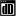
<style>
.page{position:relative;width:16px;height:16px;background:#010000}
.page>*{position:absolute;margin:0}
.t1{font:13.1px "Impact";color:#010000;scale:0.83 1}
</style>
<div class="page">
<p class="t1" style="left:2px;top:4px;width:12px;height:10px">dD</p>
</div>
